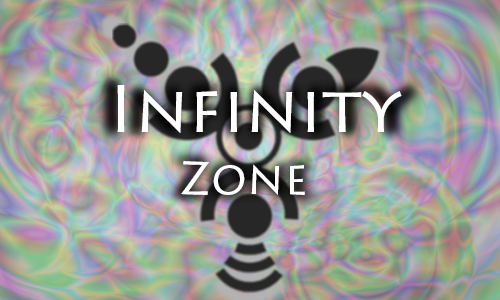
<style>
.page{position:relative;width:500px;height:300px}
.page>*{position:absolute;margin:0}
.t1{font:67.1px "LithosPro-Regular";color:#ffffff}
.t2{font:46.5px "LithosPro-Regular";color:#ffffff}
</style>
<div class="page">
<p class="t1" style="left:117px;top:85px;width:285px;height:48px">Infinity</p>
<p class="t2" style="left:181px;top:161px;width:124px;height:34px">Zone</p>
</div>
